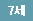
<style>
.page{position:relative;width:33px;height:21px;background:#609ead}
.page>*{position:absolute;margin:0}
.t1{font:12px "Dotum";color:#ffffff;font-weight:bold}
</style>
<div class="page">
<p class="t1" style="left:8px;top:5px;width:17px;height:11px">7세</p>
</div>
